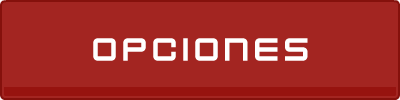
<style>
.page{position:relative;width:400px;height:100px;background:#a32521}
.page>*{position:absolute;margin:0}
.t1{font:36px "KenVector-Future";color:#ffffff}
</style>
<div class="page">
<p class="t1" style="left:93px;top:38px;width:215px;height:23px">opciones</p>
</div>
